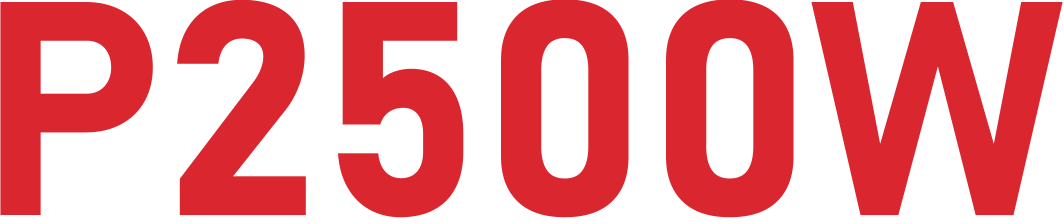
<style>
.page{position:relative;width:1064px;height:224px;background:#ffffff}
.page>*{position:absolute;margin:0}
.t1{font:300px "Bahnschrift-Bold";color:#da262f;font-weight:bold}
</style>
<div class="page">
<p class="t1" style="left:0px;top:0px;width:1063px;height:218px">P2500W</p>
</div>
